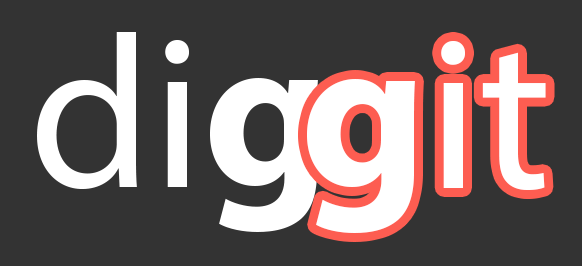
<style>
.page{position:relative;width:582px;height:266px;background:#333333}
.page>*{position:absolute;margin:0}
.t1{font:217.9px "MyriadPro-Regular";color:#ffffff}
.t2{font:217.9px "MyriadPro-Bold";color:#ffffff}
</style>
<div class="page">
<p class="t1" style="left:37px;top:32px;width:281px;height:200px">di<span class="t2">g</span></p>
<p class="t1" style="left:307px;top:41px;width:239px;height:192px"><span class="t2">g</span>it</p>
</div>
